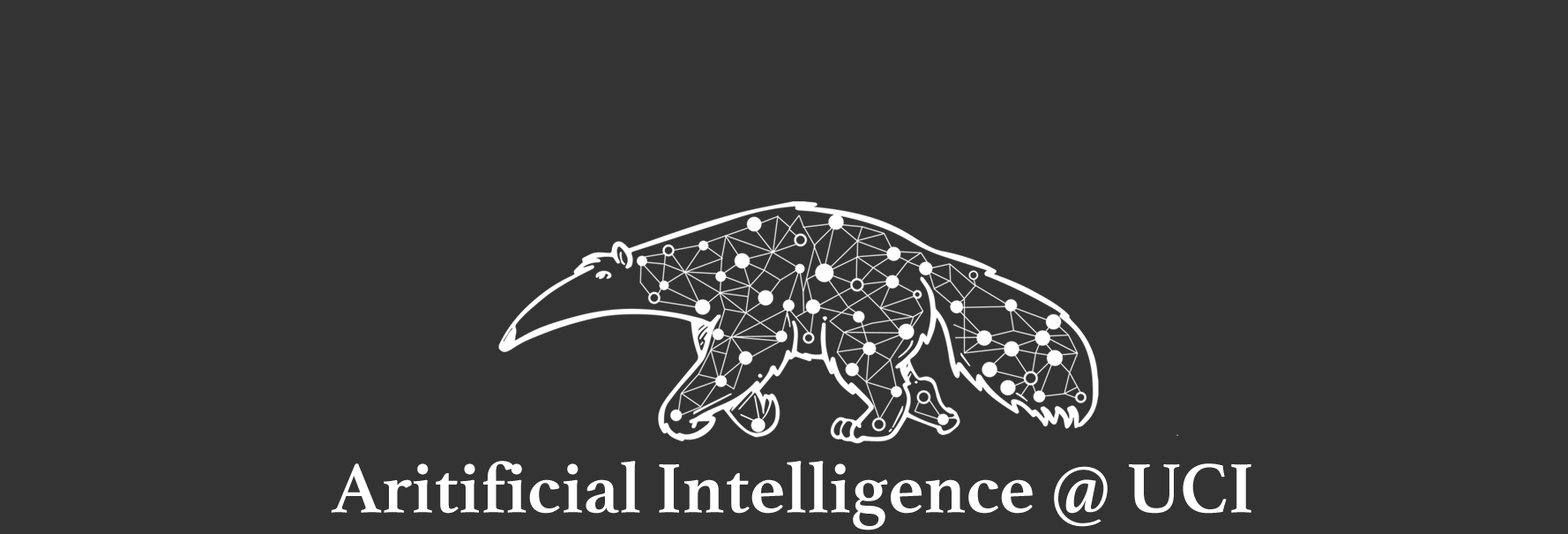
<style>
.page{position:relative;width:1568px;height:534px;background:#333333}
.page>*{position:absolute;margin:0}
.t1{font:73.2px "Athelas-Bold";color:#ffffff}
</style>
<div class="page">
<p class="t1" style="left:331px;top:460px;width:920px;height:70px">Aritificial Intelligence @ UCI</p>
</div>
